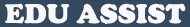
<style>
.page{position:relative;width:190px;height:27px;background:#34495e}
.page>*{position:absolute;margin:0}
.t1{font:28px "CooperBlack";color:#faf7f9}
</style>
<div class="page">
<p class="t1" style="left:5px;top:3px;width:181px;height:21px">EDU ASSIST</p>
</div>
